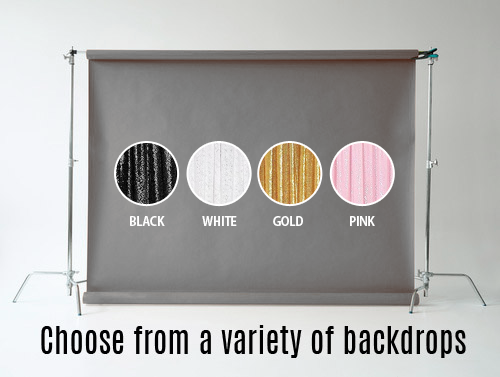
<style>
.page{position:relative;width:500px;height:377px}
.page>*{position:absolute;margin:0}
.t1{font:12px "KozGoPro-Bold";letter-spacing:-0.025em;color:#ffffff;text-transform:uppercase}
</style>
<div class="page">
<p class="t1" style="left:130px;top:216px;width:35px;height:10px">Black</p>
<p class="t1" style="left:202px;top:216px;width:35px;height:10px">white</p>
<p class="t1" style="left:273px;top:216px;width:30px;height:10px">gold</p>
<p class="t1" style="left:350px;top:216px;width:25px;height:10px">pink</p>
</div>
